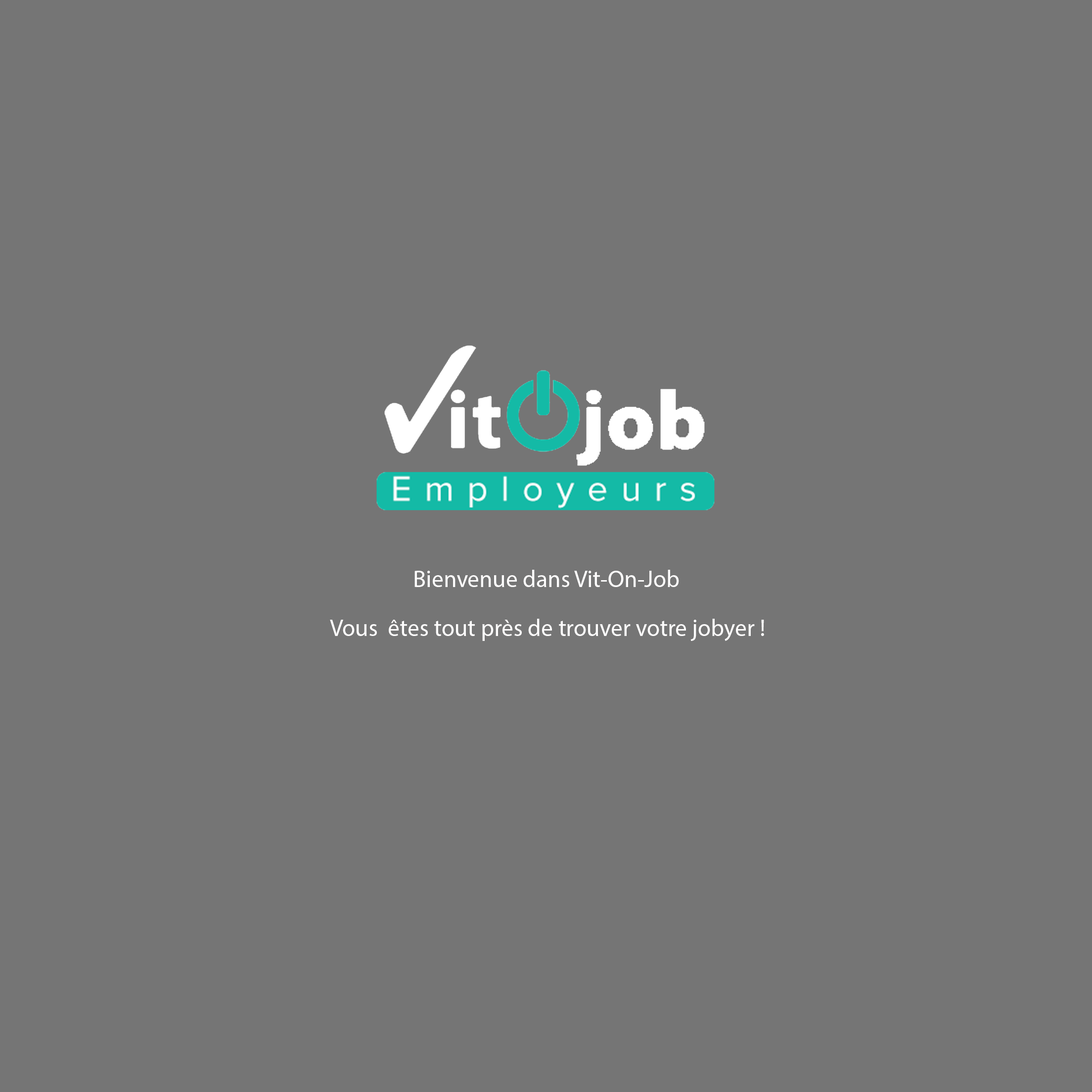
<style>
.page{position:relative;width:1092px;height:1092px;background:#757575}
.page>*{position:absolute;margin:0}
.t1{font:23.7px "MyriadPro-Regular";color:#fefdfd}
</style>
<div class="page">
<p class="t1" style="left:414px;top:570px;width:265px;height:17px">Bienvenue dans Vit-On-Job</p>
<p class="t1" style="left:330px;top:619px;width:434px;height:22px">Vous  êtes tout près de trouver votre jobyer !</p>
</div>
